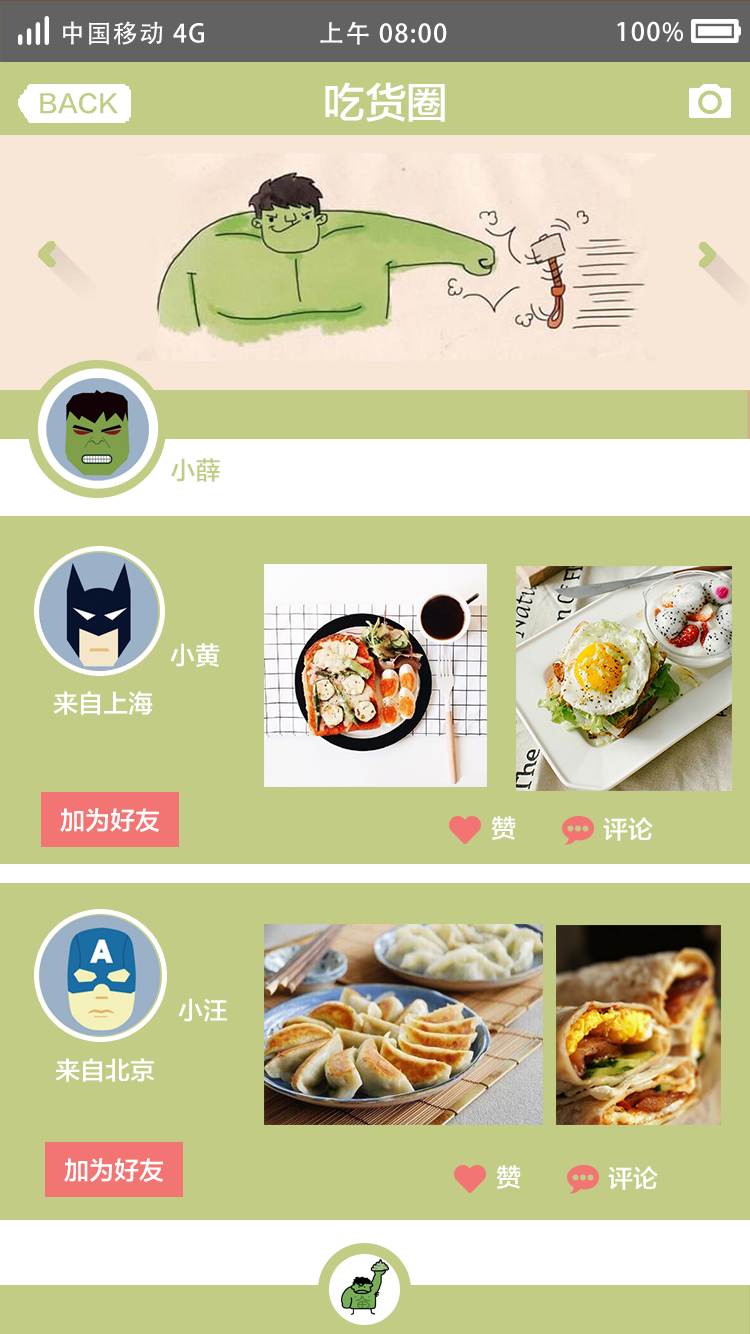
<style>
.page{position:relative;width:750px;height:1334px;background:#c2cc85}
.page>*{position:absolute;margin:0}
.t1{font:25px "AdobeHeitiStd-Regular";letter-spacing:0.06em;color:#ffffff}
.t2{font:41.7px "FZLTZHK--GBK1-0";color:#ffffff;text-transform:uppercase}
.t3{font:25px "FZLTZHK--GBK1-0";color:#c2cc85;text-transform:uppercase}
.t4{font:25px "FZLTZHK--GBK1-0";color:#ffffff;text-transform:uppercase}
</style>
<div class="page">
<p class="t1" style="left:63px;top:21px;width:141px;height:24px">中国移动 4G</p>
<p class="t1" style="left:320px;top:21px;width:127px;height:24px">上午 08:00</p>
<p class="t1" style="left:617px;top:21px;width:66px;height:21px">100%</p>
<p class="t2" style="left:325px;top:82px;width:120px;height:40px">吃货圈</p>
<p class="t3" style="left:40px;top:92px;width:78px;height:22px">back</p>
<p class="t3" style="left:171px;top:458px;width:49px;height:24px">小薛</p>
<p class="t4" style="left:170px;top:643px;width:50px;height:24px">小黄</p>
<p class="t4" style="left:53px;top:691px;width:100px;height:24px">来自上海</p>
<p class="t4" style="left:60px;top:808px;width:99px;height:24px">加为好友</p>
<p class="t4" style="left:491px;top:816px;width:25px;height:24px">赞</p>
<p class="t4" style="left:603px;top:817px;width:50px;height:24px">评论</p>
<p class="t4" style="left:178px;top:998px;width:49px;height:24px">小汪</p>
<p class="t4" style="left:55px;top:1058px;width:99px;height:24px">来自北京</p>
<p class="t4" style="left:64px;top:1158px;width:99px;height:24px">加为好友</p>
<p class="t4" style="left:496px;top:1165px;width:25px;height:24px">赞</p>
<p class="t4" style="left:608px;top:1166px;width:50px;height:24px">评论</p>
</div>
